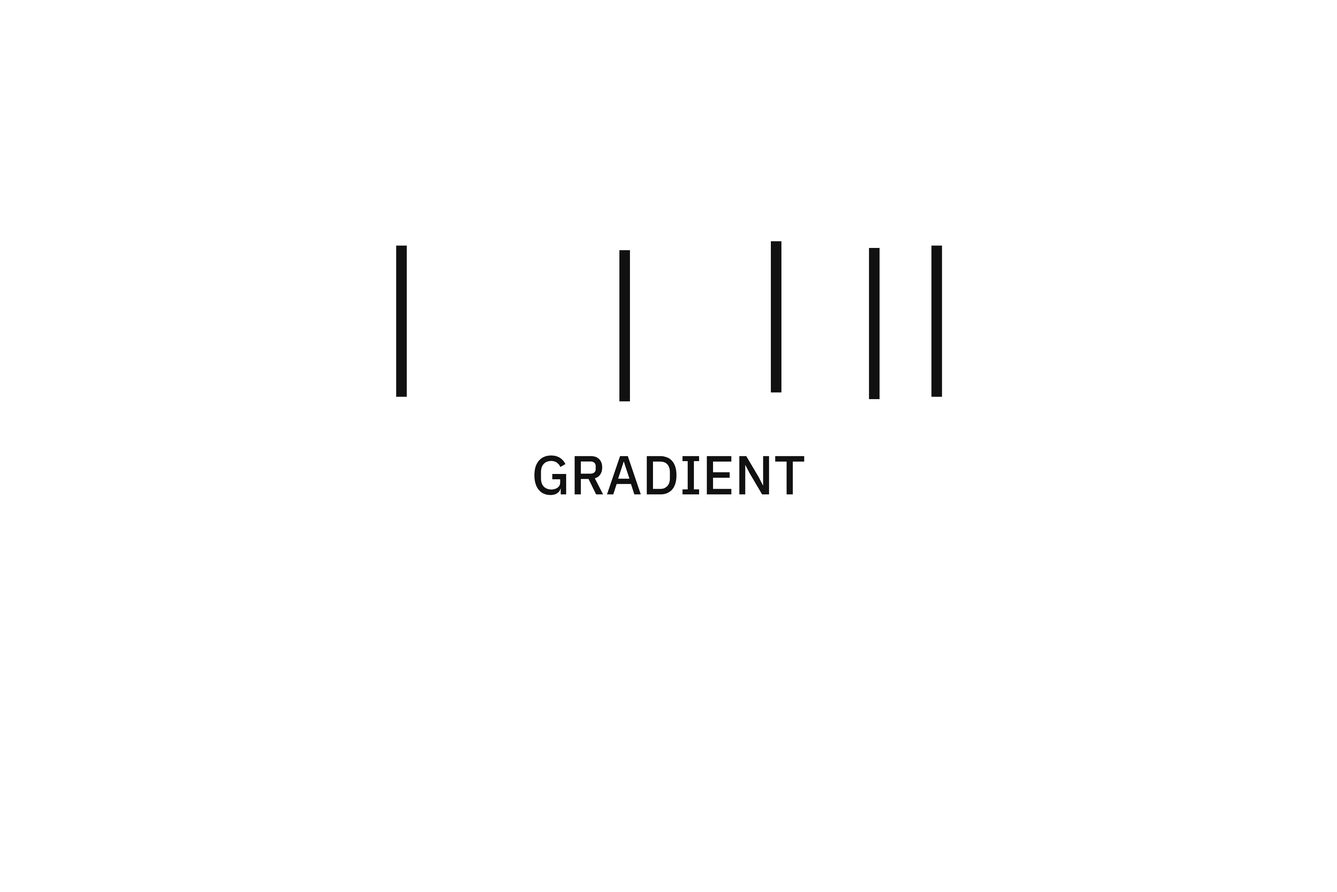
<style>
.page{position:relative;width:1337px;height:892px;background:#ffffff}
.page>*{position:absolute;margin:0}
.t1{font:54.9px "IBMPlexSans-Medium";color:#111111}
</style>
<div class="page">
<p class="t1" style="left:534px;top:455px;width:271px;height:40px">GRADIENT</p>
</div>
